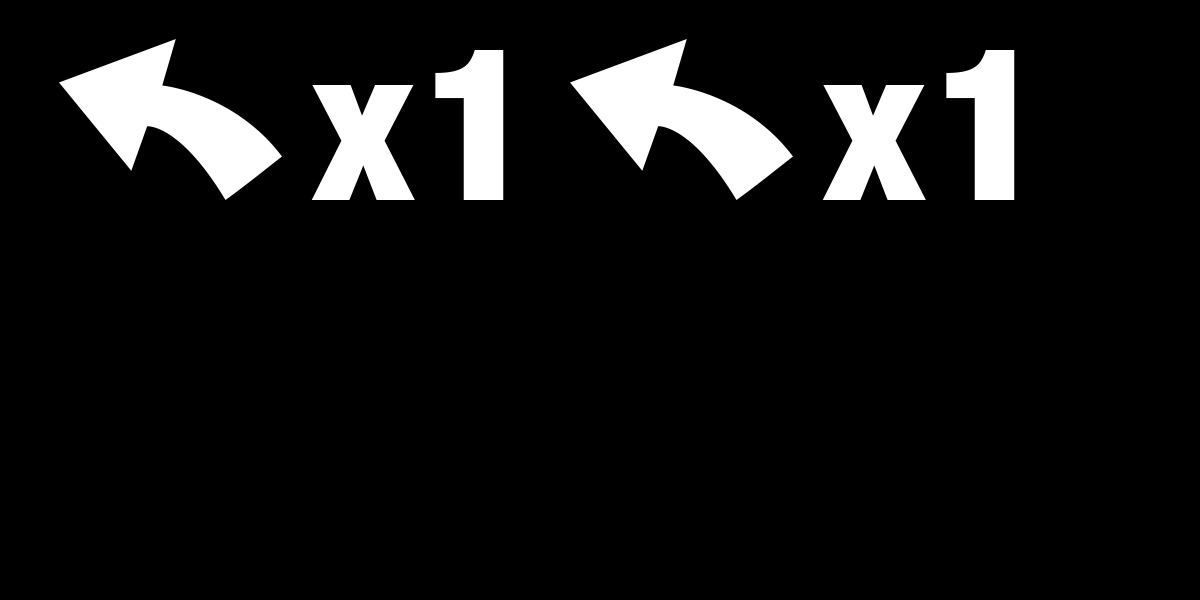
<style>
.page{position:relative;width:1200px;height:600px;background:#000000}
.page>*{position:absolute;margin:0}
.t1{font:211.9px "HelveticaNeue-CondensedBlack";letter-spacing:0.05em;color:#ffffff}
</style>
<div class="page">
<p class="t1" style="left:311px;top:50px;width:193px;height:150px">x1</p>
<p class="t1" style="left:822px;top:50px;width:193px;height:150px">x1</p>
</div>
